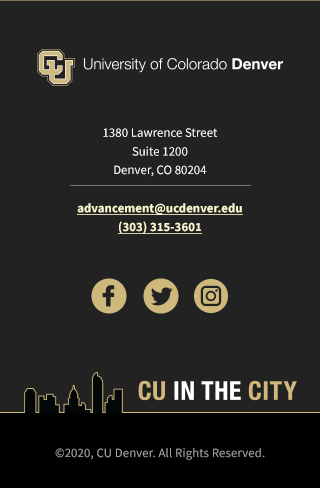
<style>
.page{position:relative;width:320px;height:488px;background:#222222}
.page>*{position:absolute;margin:0}
.t1{font:12.8px/18.7px "SourceSansPro-Regular";letter-spacing:0.005em;color:#ffffff}
.t2{font:12.8px/18.7px "SourceSansPro-Bold";letter-spacing:0.005em;color:#fbf8d0;text-decoration:underline}
.t3{font:12.8px "SourceSansPro-Regular";letter-spacing:0.01em;color:#a0a0a0}
</style>
<div class="page">
<p class="t1" style="left:103px;top:128px;width:115px;height:49px;text-align:center">1380 Lawrence Street<br>Suite 1200<br>Denver, CO 80204</p>
<p class="t2" style="left:77px;top:203px;width:166px;height:31px;text-align:center">advancement@ucdenver.edu<br>(303) 315-3601</p>
<p class="t3" style="left:55px;top:448px;width:210px;height:12px">©2020, CU Denver. All Rights Reserved.</p>
</div>
